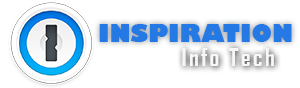
<style>
.page{position:relative;width:300px;height:88px;background:#ffffff}
.page>*{position:absolute;margin:0}
.t1{font:24px "GillSans-UltraBold";color:#2479e4}
.t2{font:24px "AgencyFB-Bold";letter-spacing:0.1em;color:#f7f7f7}
</style>
<div class="page">
<p class="t1" style="left:99px;top:24px;width:193px;height:18px">INSPIRATION</p>
<p class="t2" style="left:182px;top:48px;width:92px;height:18px">Info Tech</p>
</div>
